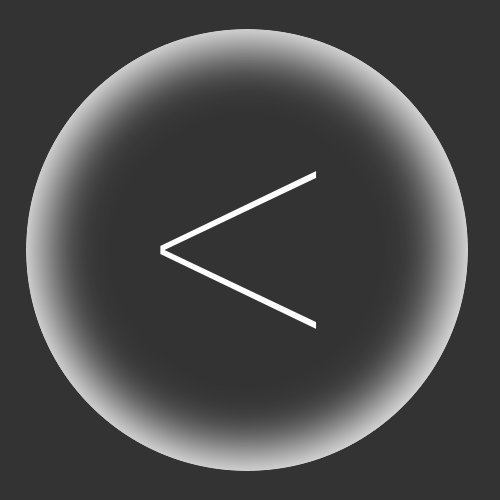
<style>
.page{position:relative;width:500px;height:500px;background:#333333}
.page>*{position:absolute;margin:0}
.t1{font:334.2px "AvenirNextCondensed-UltraLight";color:#fffefe}
</style>
<div class="page">
<p class="t1" style="left:160px;top:171px;width:157px;height:158px">&lt;</p>
</div>
